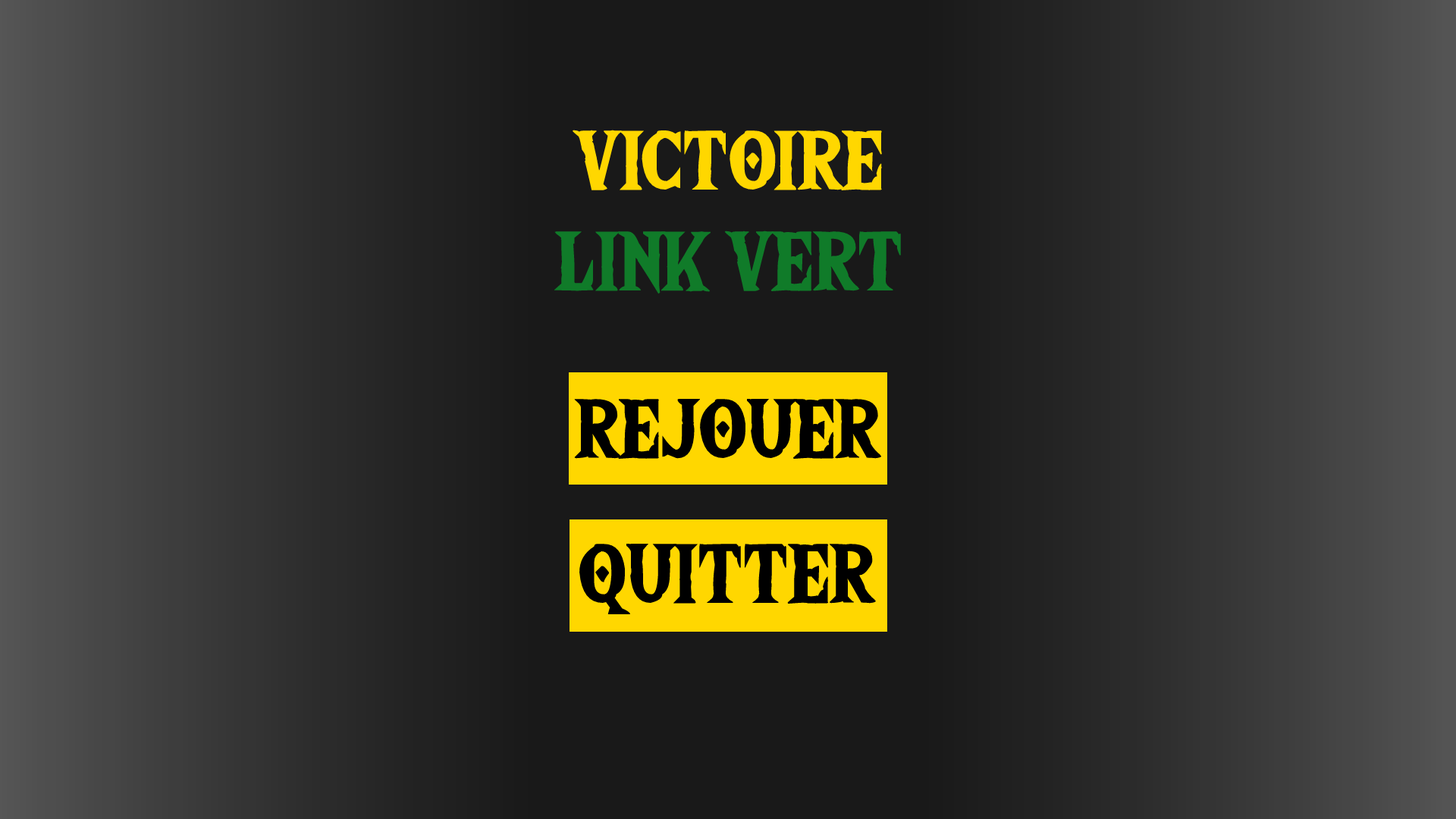
<style>
.page{position:relative;width:1456px;height:819px}
.page>*{position:absolute;margin:0}
.t1{font:84.2px "TheWildBreathofZelda";color:#107b29}
.t2{font:84.2px "TheWildBreathofZelda";color:#ffd700}
.t3{font:84.2px "TheWildBreathofZelda";color:#000000}
</style>
<div class="page">
<p class="t1" style="left:554px;top:129px;width:347px;height:165px;text-align:center"><span class="t2">VICTOIRE<br></span>LINK VERT</p>
<p class="t3" style="left:574px;top:399px;width:308px;height:61px">REJOUER</p>
<p class="t3" style="left:579px;top:544px;width:297px;height:70px">QUITTER</p>
</div>
